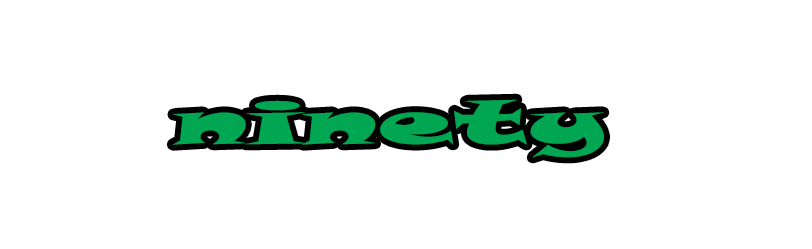
<style>
.page{position:relative;width:812px;height:249px;background:#ffffff}
.page>*{position:absolute;margin:0}
.t1{font:60px "SnapITC-Regular";color:#00a651;scale:2 1}
</style>
<div class="page">
<p class="t1" style="left:172px;top:99px;width:432px;height:59px">ninety</p>
</div>
